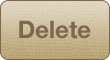
<style>
.page{position:relative;width:110px;height:60px}
.page>*{position:absolute;margin:0}
.t1{font:24px "HelveticaNeue-Bold";color:#7c684c}
</style>
<div class="page">
<p class="t1" style="left:19px;top:20px;width:72px;height:19px">Delete</p>
</div>
